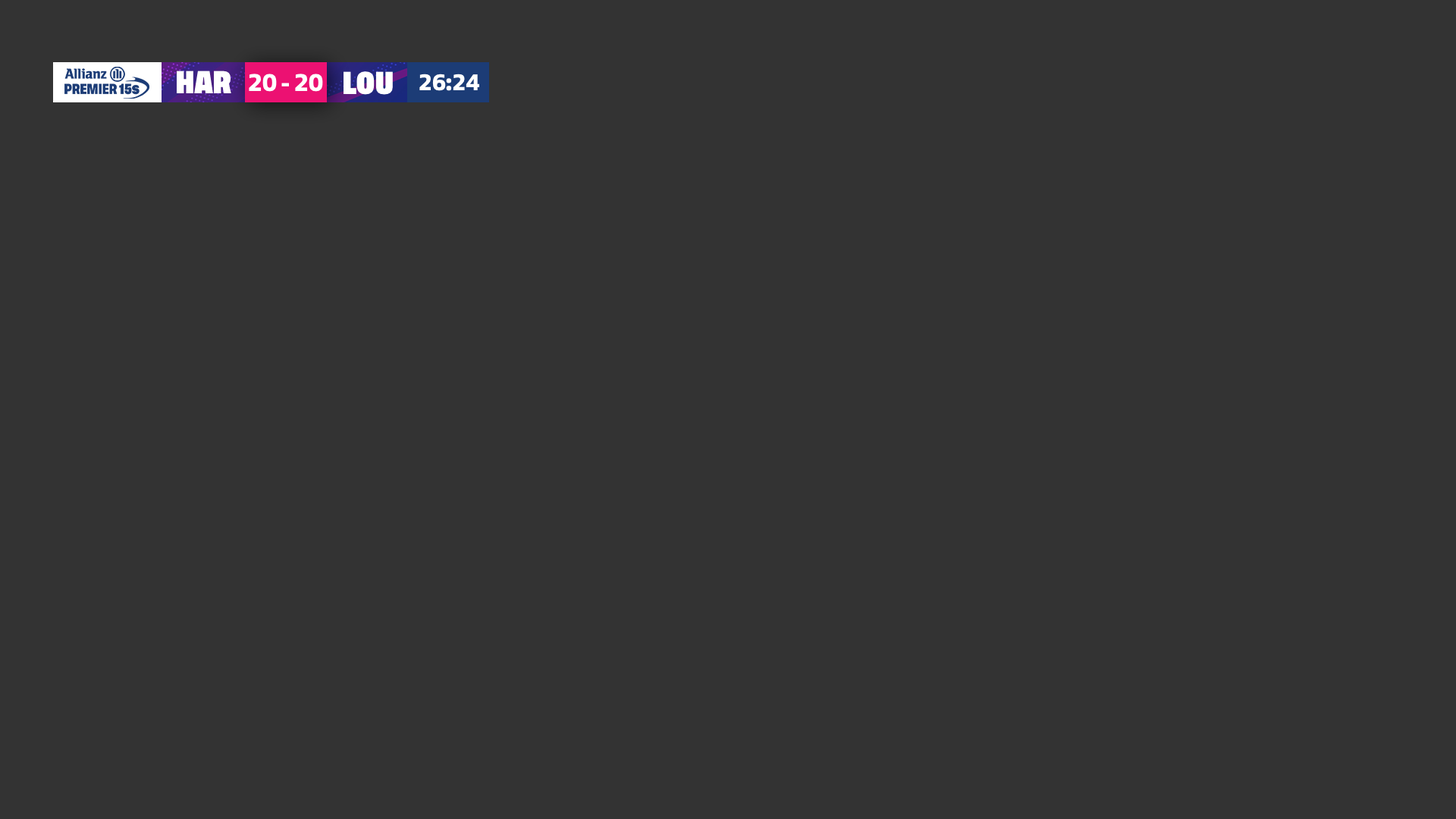
<style>
.page{position:relative;width:1456px;height:819px;background:#333333}
.page>*{position:absolute;margin:0}
.t1{font:23.6px "TuskerGrotesk-7700Bold";color:#ffffff;text-transform:uppercase}
.t2{font:25px "FSHackneyTrial-Heavy";color:#ffffff;text-transform:uppercase}
.t3{font:23.6px "FSHackneyTrial-Heavy";color:#ffffff;text-transform:uppercase}
</style>
<div class="page">
<p class="t1" style="left:177px;top:71px;width:54px;height:22px">HAR</p>
<p class="t2" style="left:249px;top:74px;width:74px;height:18px">20 - 20</p>
<p class="t1" style="left:344px;top:71px;width:49px;height:24px">LOU</p>
<p class="t3" style="left:419px;top:74px;width:60px;height:17px">26:24</p>
</div>
